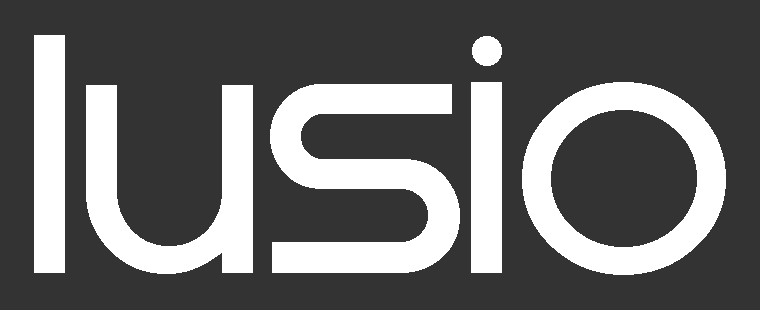
<style>
.page{position:relative;width:760px;height:310px;background:#333333}
.page>*{position:absolute;margin:0}
.t1{font:300px "Whattimeisit";color:#ffffff}
</style>
<div class="page">
<p class="t1" style="left:34px;top:35px;width:692px;height:240px">lusio</p>
<p class="t1" style="left:34px;top:35px;width:692px;height:240px">lusio</p>
</div>
